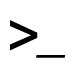
<style>
.page{position:relative;width:75px;height:75px;background:#ffffff}
.page>*{position:absolute;margin:0}
.t1{font:57.3px "MyriadPro-BoldIt";color:#000000}
</style>
<div class="page">
<p class="t1" style="left:10px;top:20px;width:56px;height:38px">&gt;_</p>
</div>
